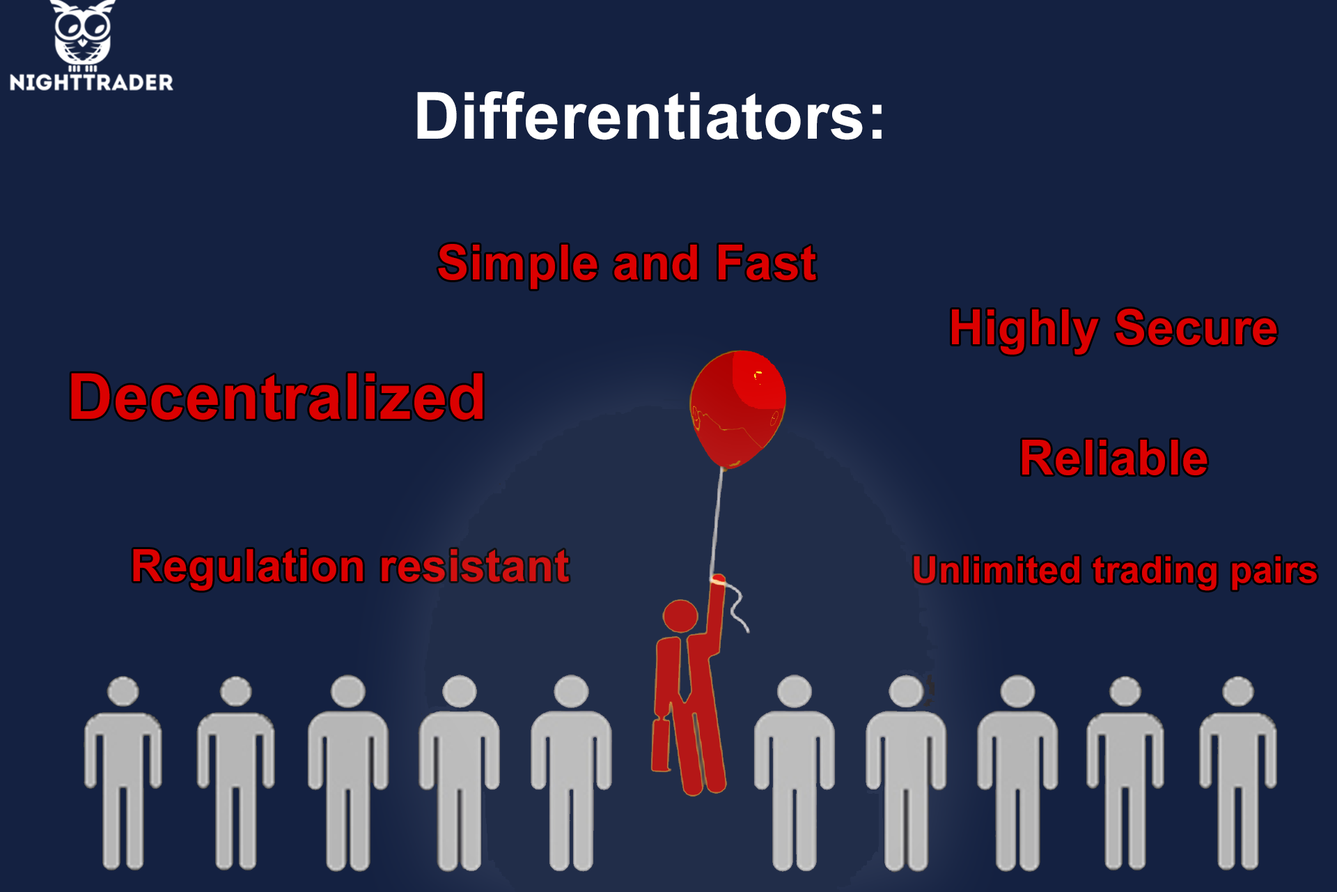
<style>
.page{position:relative;width:1337px;height:892px;background:#142141}
.page>*{position:absolute;margin:0}
.t1{font:65px "Arial-BoldMT";letter-spacing:0.01em;color:#ffffff}
.t2{font:48.7px "Arial-BoldMT";letter-spacing:0.01em;color:#db0000}
.t3{font:63.4px "Arial-BoldMT";letter-spacing:0.01em;color:#db0000}
.t4{font:44.8px "Arial-BoldMT";letter-spacing:0.01em;color:#db0000}
.t5{font:36.7px "Arial-BoldMT";letter-spacing:0.01em;color:#db0000}
</style>
<div class="page">
<p class="t1" style="left:417px;top:91px;width:465px;height:49px">Differentiators:</p>
<p class="t2" style="left:438px;top:244px;width:378px;height:45px">Simple and Fast</p>
<p class="t2" style="left:952px;top:309px;width:325px;height:46px">Highly Secure</p>
<p class="t3" style="left:71px;top:373px;width:412px;height:47px">Decentralized</p>
<p class="t2" style="left:1023px;top:440px;width:185px;height:35px">Reliable</p>
<p class="t4" style="left:133px;top:549px;width:436px;height:42px">Regulation resistant</p>
<p class="t5" style="left:914px;top:556px;width:403px;height:35px">Unlimited trading pairs</p>
</div>
